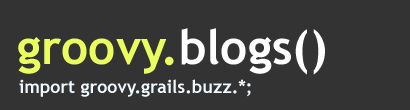
<style>
.page{position:relative;width:410px;height:110px;background:#333333}
.page>*{position:absolute;margin:0}
.t1{font:47.8px "TrebuchetMS-Bold";color:#eaff5e}
.t2{font:47.8px "TrebuchetMS-Bold";color:#ffffff}
.t3{font:17.9px "TrebuchetMS-Bold";color:#f0f9ff}
</style>
<div class="page">
<p class="t1" style="left:18px;top:28px;width:307px;height:47px">groovy.<span class="t2">blogs()</span></p>
<p class="t3" style="left:19px;top:79px;width:232px;height:18px">import groovy.grails.buzz.*;</p>
</div>
